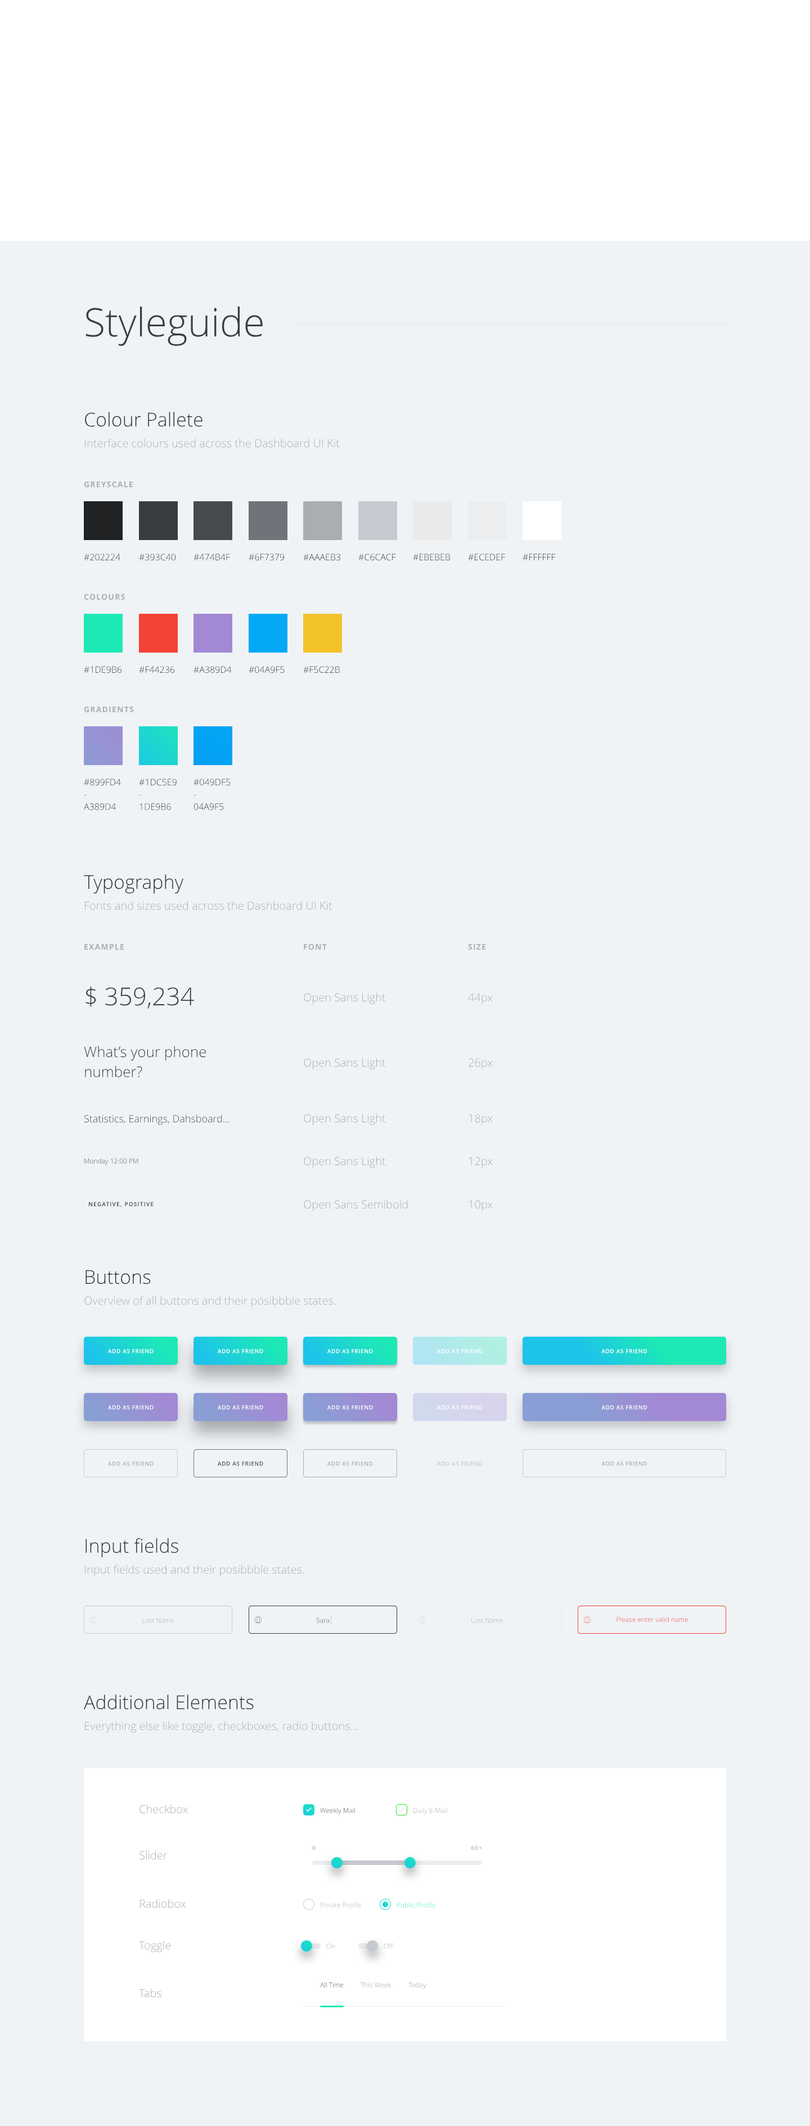
<style>
.page{position:relative;width:810px;height:2126px;background:#f0f3f6}
.page>*{position:absolute;margin:0}
.t1{font:39.4px "OpenSans-Light";color:#393c40}
.t2{font:19.1px "OpenSans-Light";color:#2c2e31}
.t3{font:11.2px "OpenSans-Light";color:#aaaeb3}
.t4{font:7.9px "OpenSans-Bold";letter-spacing:0.086em;color:#aaaeb3}
.t5{font:7.9px "OpenSans-Bold";color:#aaaeb3}
.t6{font:9px "OpenSans-Light";color:#212224}
.t7{font:9px "OpenSans-Light"}
.t8{font:9px "OpenSans-Light";color:#2b2c2e}
.t9{font:9px "OpenSans-Light";color:#313234}
.t10{font:9px "OpenSans-Light";color:#2d2e30}
.t11{font:9px "OpenSans-Light";color:#37383a}
.t12{font:9px "OpenSans-Light";color:#3b3c3e}
.t13{font:9px "OpenSans-Light";color:#323335}
.t14{font:9px "OpenSans-Light";color:#303133}
.t15{font:9px "OpenSans-Light";color:#3f4042}
.t16{font:9px "OpenSans-Light";color:#333437}
.t17{font:24.8px "OpenSans-Light";color:#393c40}
.t18{font:14.6px "OpenSans-Light";color:#393c40}
.t19{font:10.1px "OpenSans-Light";color:#393c40}
.t20{font:6.8px "OpenSans-Light"}
.t21{font:5.6px "OpenSans-Semibold";letter-spacing:0.12em;color:#393c40}
.t22{font:5.6px "OpenSans-Semibold";letter-spacing:0.06em;color:#ffffff}
.t23{font:5.6px "OpenSans-Semibold";color:#ffffff}
.t24{font:5.6px "OpenSans-Semibold";letter-spacing:0.06em;color:#aaaeb3}
.t25{font:5.6px "OpenSans-Semibold";color:#aaaeb3}
.t26{font:5.6px "OpenSans-Semibold";letter-spacing:0.06em;color:#474b4f}
.t27{font:5.6px "OpenSans-Semibold";color:#474b4f}
.t28{font:5.6px "OpenSans-Semibold";letter-spacing:0.06em;color:#c6c9cf}
.t29{font:5.6px "OpenSans-Semibold";color:#c6c9cf}
.t30{font:6.8px "OpenSans-Light";color:#aaaeb3}
.t31{font:5.6px "OpenSans-Semibold";letter-spacing:0.12em;color:#aaaeb3}
.t32{font:6.8px "OpenSans-Light";color:#999ea4}
</style>
<div class="page">
<p class="t1" style="left:86px;top:306px;width:177px;height:40px">Styleguide</p>
<p class="t2" style="left:85px;top:412px;width:117px;height:15px">Colour Pallete</p>
<p class="t3" style="left:85px;top:438px;width:255px;height:10px">Interface colours used across the Dashboard UI Kit</p>
<p class="t4" style="left:84px;top:481px;width:49px;height:7px">GREYSCAL<span class="t5">E</span></p>
<p class="t6" style="left:84px;top:554px;width:36px;height:7px">#202224</p>
<p class="t7" style="left:139px;top:554px;width:37px;height:7px">#393C40</p>
<p class="t7" style="left:194px;top:554px;width:36px;height:6px">#474B4F</p>
<p class="t8" style="left:249px;top:554px;width:35px;height:7px">#6F7379</p>
<p class="t9" style="left:303px;top:554px;width:37px;height:7px">#AAAEB3</p>
<p class="t10" style="left:358px;top:554px;width:38px;height:7px">#C6CACF</p>
<p class="t11" style="left:413px;top:554px;width:38px;height:6px">#EBEBEB</p>
<p class="t12" style="left:468px;top:554px;width:37px;height:7px">#ECEDEF</p>
<p class="t11" style="left:523px;top:554px;width:33px;height:6px">#FFFFFF</p>
<p class="t4" style="left:84px;top:593px;width:41px;height:7px">COLOURS</p>
<p class="t7" style="left:84px;top:666px;width:38px;height:7px">#1DE9B6</p>
<p class="t11" style="left:139px;top:666px;width:36px;height:7px">#F44236</p>
<p class="t13" style="left:194px;top:666px;width:38px;height:7px">#A389D4</p>
<p class="t6" style="left:249px;top:666px;width:36px;height:7px">#04A9F5</p>
<p class="t11" style="left:303px;top:666px;width:37px;height:7px">#F5C22B</p>
<p class="t4" style="left:84px;top:706px;width:50px;height:7px">GRADIENTS</p>
<p class="t14" style="left:84px;top:778px;width:37px;height:32px">#899FD4<br>-<br>A389D4</p>
<p class="t15" style="left:139px;top:778px;width:38px;height:32px">#1DC5E9<br>-<br>1DE9B6</p>
<p class="t16" style="left:194px;top:778px;width:37px;height:32px">#049DF5<br>-<br>04A9F5</p>
<p class="t2" style="left:84px;top:874px;width:100px;height:20px">Typography</p>
<p class="t3" style="left:85px;top:901px;width:247px;height:9px">Fonts and sizes used across the Dashboard UI Kit</p>
<p class="t4" style="left:84px;top:943px;width:40px;height:7px">EXAMPLE</p>
<p class="t4" style="left:304px;top:943px;width:23px;height:7px">FONT</p>
<p class="t4" style="left:468px;top:943px;width:18px;height:7px">SIZE</p>
<p class="t17" style="left:86px;top:986px;width:109px;height:23px">$ 359,234</p>
<p class="t3" style="left:304px;top:992px;width:82px;height:12px">Open Sans Light</p>
<p class="t3" style="left:468px;top:993px;width:25px;height:11px">44px</p>
<p class="t18" style="left:84px;top:1046px;width:122px;height:31px">What’s your phone<br>number?</p>
<p class="t3" style="left:304px;top:1058px;width:82px;height:11px">Open Sans Light</p>
<p class="t3" style="left:469px;top:1058px;width:24px;height:11px">26px</p>
<p class="t19" style="left:84px;top:1114px;width:146px;height:11px">Statistics, Earnings, Dahsboard…</p>
<p class="t3" style="left:304px;top:1113px;width:82px;height:12px">Open Sans Light</p>
<p class="t3" style="left:469px;top:1114px;width:24px;height:11px">18px</p>
<p class="t20" style="left:84px;top:1158px;width:54px;height:7px">Monday 12:00 PM</p>
<p class="t3" style="left:304px;top:1156px;width:82px;height:12px">Open Sans Light</p>
<p class="t3" style="left:469px;top:1156px;width:24px;height:12px">12px</p>
<p class="t21" style="left:89px;top:1202px;width:65px;height:5px">NEGATIVE, POSITIVE</p>
<p class="t3" style="left:304px;top:1199px;width:104px;height:12px">Open Sans Semibold</p>
<p class="t3" style="left:469px;top:1200px;width:24px;height:11px">10px</p>
<p class="t2" style="left:86px;top:1270px;width:65px;height:14px">Buttons</p>
<p class="t3" style="left:84px;top:1295px;width:252px;height:12px">Overview of all buttons and their posibbble states.</p>
<p class="t22" style="left:107px;top:1348px;width:47px;height:5px">ADD AS FRIEN<span class="t23">D</span></p>
<p class="t22" style="left:217px;top:1348px;width:46px;height:5px">ADD AS FRIEN<span class="t23">D</span></p>
<p class="t22" style="left:327px;top:1348px;width:46px;height:5px">ADD AS FRIEN<span class="t23">D</span></p>
<p class="t22" style="left:436px;top:1348px;width:47px;height:5px">ADD AS FRIEN<span class="t23">D</span></p>
<p class="t22" style="left:601px;top:1349px;width:46px;height:4px">ADD AS FRIEN<span class="t23">D</span></p>
<p class="t22" style="left:107px;top:1405px;width:47px;height:5px">ADD AS FRIEN<span class="t23">D</span></p>
<p class="t22" style="left:217px;top:1405px;width:46px;height:5px">ADD AS FRIEN<span class="t23">D</span></p>
<p class="t22" style="left:327px;top:1405px;width:46px;height:5px">ADD AS FRIEN<span class="t23">D</span></p>
<p class="t22" style="left:436px;top:1405px;width:47px;height:5px">ADD AS FRIEN<span class="t23">D</span></p>
<p class="t22" style="left:601px;top:1405px;width:46px;height:5px">ADD AS FRIEN<span class="t23">D</span></p>
<p class="t24" style="left:107px;top:1461px;width:47px;height:5px">ADD AS FRIEN<span class="t25">D</span></p>
<p class="t26" style="left:217px;top:1461px;width:46px;height:5px">ADD AS FRIEN<span class="t27">D</span></p>
<p class="t24" style="left:327px;top:1461px;width:46px;height:5px">ADD AS FRIEN<span class="t25">D</span></p>
<p class="t28" style="left:436px;top:1461px;width:47px;height:5px">ADD AS FRIEN<span class="t29">D</span></p>
<p class="t24" style="left:601px;top:1461px;width:46px;height:5px">ADD AS FRIEN<span class="t25">D</span></p>
<p class="t2" style="left:86px;top:1537px;width:92px;height:21px">Input fields</p>
<p class="t3" style="left:85px;top:1564px;width:219px;height:12px">Input fields used and their posibbble states.</p>
<p class="t30" style="left:142px;top:1617px;width:32px;height:6px">Last Name</p>
<p class="t20" style="left:316px;top:1617px;width:13px;height:6px">Sara</p>
<p class="t30" style="left:471px;top:1617px;width:32px;height:6px">Last Name</p>
<p class="t20" style="left:616px;top:1617px;width:72px;height:5px">Please enter valid name</p>
<p class="t2" style="left:84px;top:1694px;width:170px;height:15px">Additional Elements</p>
<p class="t3" style="left:85px;top:1721px;width:273px;height:11px">Everything else like toggle, checkboxes, radio buttons…</p>
<p class="t3" style="left:140px;top:1804px;width:48px;height:10px">Checkbox</p>
<p class="t20" style="left:320px;top:1807px;width:35px;height:8px">Weekly Mail</p>
<p class="t30" style="left:413px;top:1807px;width:34px;height:8px">Daily E-Mail</p>
<p class="t3" style="left:140px;top:1850px;width:28px;height:10px">Slider</p>
<p class="t31" style="left:312px;top:1846px;width:4px;height:4px">0</p>
<p class="t31" style="left:471px;top:1846px;width:11px;height:4px">60+</p>
<p class="t3" style="left:140px;top:1898px;width:46px;height:10px">Radiobox</p>
<p class="t30" style="left:321px;top:1902px;width:41px;height:5px">Private Profile</p>
<p class="t20" style="left:397px;top:1902px;width:38px;height:5px">Public Profile</p>
<p class="t3" style="left:139px;top:1940px;width:32px;height:12px">Toggle</p>
<p class="t20" style="left:326px;top:1943px;width:9px;height:5px">On</p>
<p class="t20" style="left:384px;top:1943px;width:9px;height:5px">Off</p>
<p class="t20" style="left:320px;top:1982px;width:24px;height:5px">All Time</p>
<p class="t32" style="left:361px;top:1982px;width:31px;height:5px">This Week</p>
<p class="t20" style="left:408px;top:1982px;width:18px;height:7px">Today</p>
<p class="t3" style="left:139px;top:1988px;width:22px;height:9px">Tabs</p>
</div>
